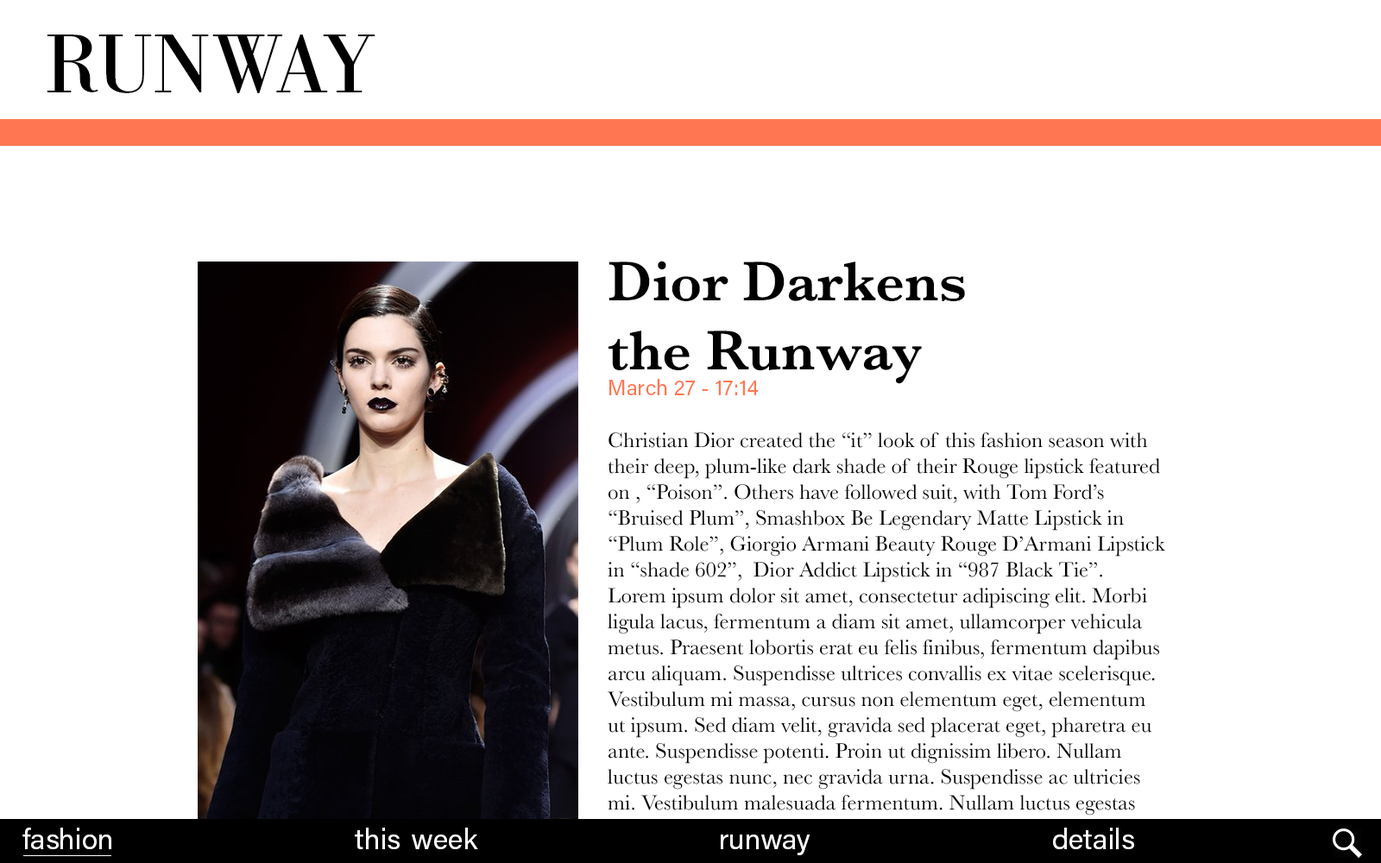
<style>
.page{position:relative;width:1381px;height:863px;background:#ffffff}
.page>*{position:absolute;margin:0}
.t1{font:86.3px "BodoniURW-Reg";color:#000000}
.t2{font:21.6px "Baskerville";color:#000000}
.t3{font:57.6px "Baskerville-SemiBold";color:#000000}
.t4{font:21.6px "AcuminPro-Regular";color:#ff7752}
.t5{font:28.8px "AcuminPro-Regular";color:#ffffff}
.t6{font:28.8px "AcuminPro-Regular";color:#000000}
</style>
<div class="page">
<p class="t1" style="left:47px;top:35px;width:329px;height:58px">RUNWAY</p>
<p class="t2" style="left:608px;top:261px;width:557px;height:555px"><span class="t3">Dior Darkens <br>the Runway<br></span><span class="t4">March 27 - 17:14<br><br></span>Christian Dior created the “it” look of this fashion season with their deep, plum-like dark shade of their Rouge lipstick featured on , “Poison”. Others have followed suit, with Tom Ford’s “Bruised Plum”, Smashbox Be Legendary Matte Lipstick in “Plum Role”, Giorgio Armani Beauty Rouge D’Armani Lipstick in “shade 602”,  Dior Addict Lipstick in “987 Black Tie”. Lorem ipsum dolor sit amet, consectetur adipiscing elit. Morbi ligula lacus, fermentum a diam sit amet, ullamcorper vehicula metus. Praesent lobortis erat eu felis finibus, fermentum dapibus arcu aliquam. Suspendisse ultrices convallis ex vitae scelerisque. Vestibulum mi massa, cursus non elementum eget, elementum ut ipsum. Sed diam velit, gravida sed placerat eget, pharetra eu ante. Suspendisse potenti. Proin ut dignissim libero. Nullam luctus egestas nunc, nec gravida urna. Suspendisse ac ultricies mi. Vestibulum malesuada fermentum. Nullam luctus egestas nunc, nec gravida urna. Suspendisse ac ultricies mi. Vestibulum malesuada fermentum.</p>
<p class="t5" style="left:22px;top:828px;width:1112px;height:28px">fashion this<span class="t6">-</span>week runway details</p>
</div>
